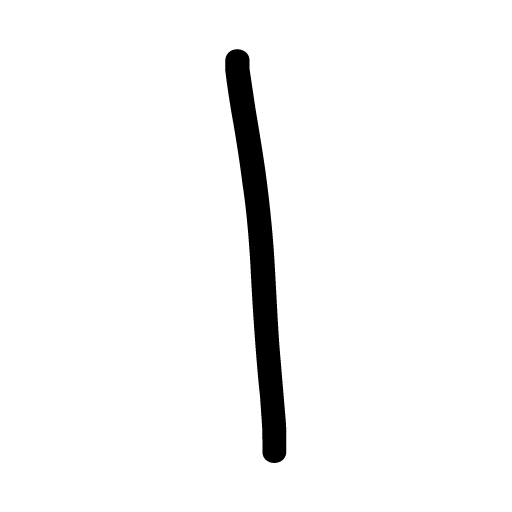
<style>
.page{position:relative;width:512px;height:512px;background:#ffffff}
.page>*{position:absolute;margin:0}
.t1{font:600px "RiseStarHand";color:#000000}
</style>
<div class="page">
<p class="t1" style="left:225px;top:49px;width:62px;height:414px">1</p>
</div>
